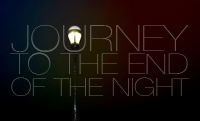
<style>
.page{position:relative;width:200px;height:121px}
.page>*{position:absolute;margin:0}
.t1{font:24.9px/22px "HelveticaNeue-UltraLight";color:#5e5e57;text-transform:uppercase;scale:1.18 1}
.t2{font:36.2px/20.9px "HelveticaNeue-UltraLight";color:#5e5e57;text-transform:uppercase;scale:1.18 1}
.t3{font:28.6px/23.1px "HelveticaNeue-UltraLight";color:#5e5e57;text-transform:uppercase;scale:1.18 1}
</style>
<div class="page">
<p class="t1" style="left:10px;top:25px;width:180px;height:71px"><span class="t2">Journey<br></span><span class="t3">To The End<br></span>Of The Night</p>
</div>
